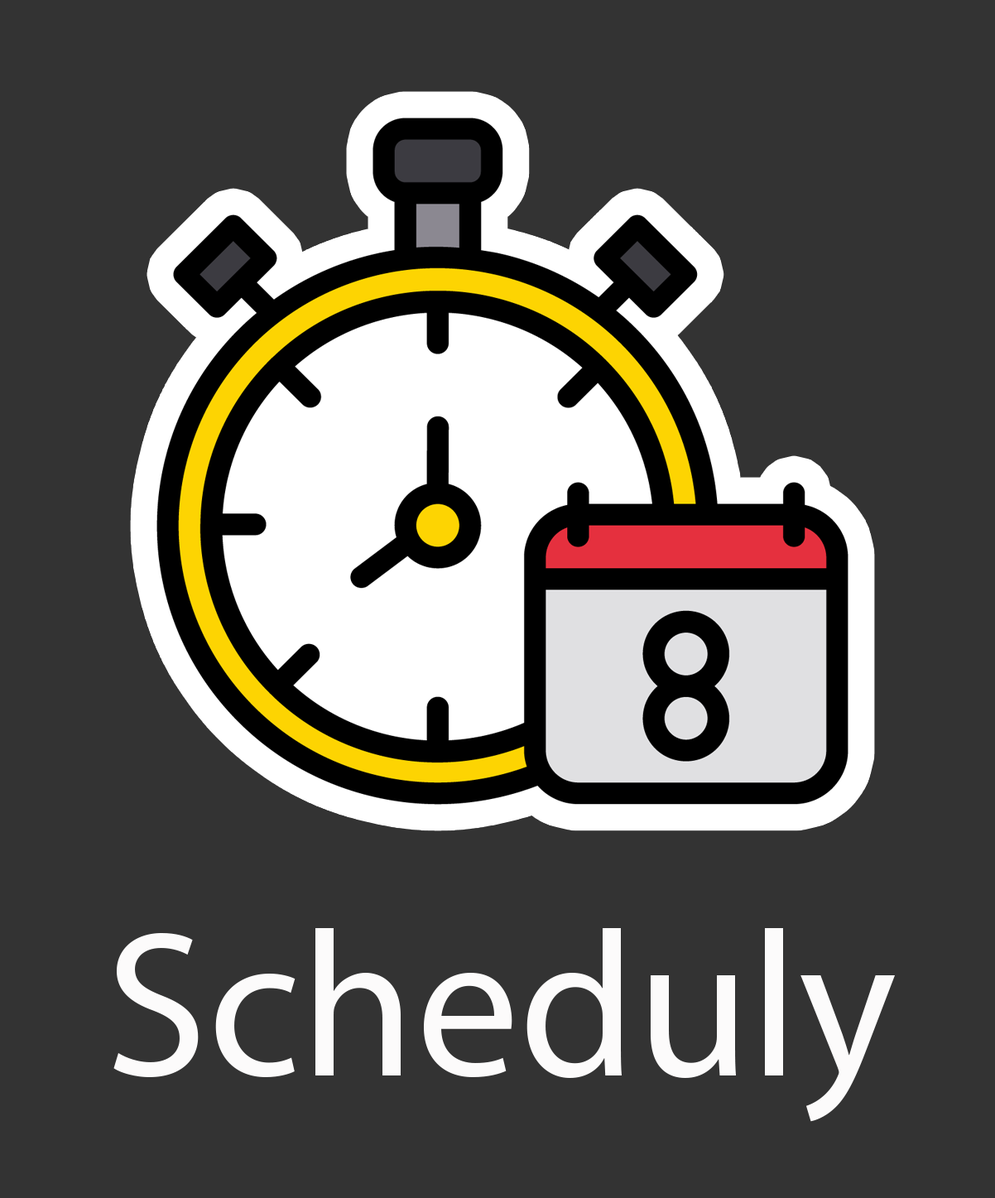
<style>
.page{position:relative;width:995px;height:1198px;background:#333333}
.page>*{position:absolute;margin:0}
.t1{font:207px "MyriadPro-Regular";color:#fcfbfb}
</style>
<div class="page">
<p class="t1" style="left:113px;top:928px;width:782px;height:194px">Scheduly</p>
</div>
